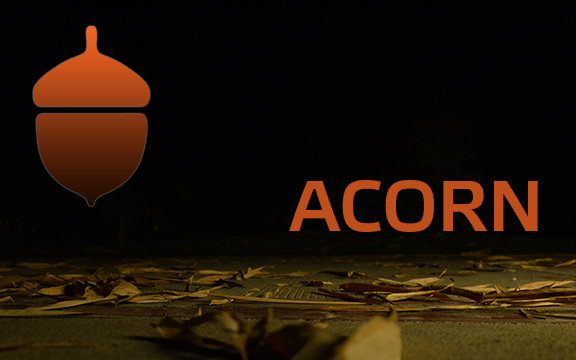
<style>
.page{position:relative;width:576px;height:360px}
.page>*{position:absolute;margin:0}
.t1{font:72px "EtelkaMediumPro";color:#c04e1a}
</style>
<div class="page">
<p class="t1" style="left:289px;top:180px;width:249px;height:52px">ACORN</p>
</div>
